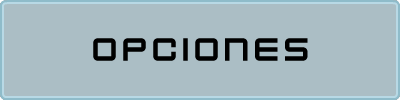
<style>
.page{position:relative;width:400px;height:100px;background:#abbec5}
.page>*{position:absolute;margin:0}
.t1{font:36px "KenVector-Future";color:#000000}
</style>
<div class="page">
<p class="t1" style="left:93px;top:38px;width:215px;height:23px">opciones</p>
</div>
